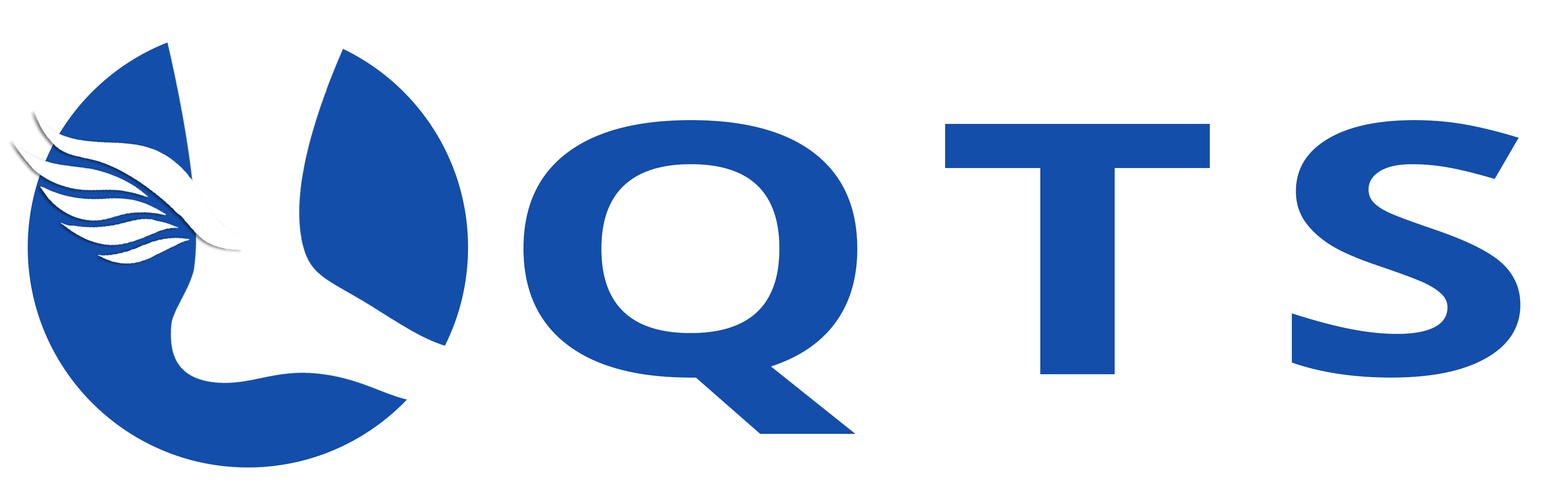
<style>
.page{position:relative;width:1568px;height:504px;background:#ffffff}
.page>*{position:absolute;margin:0}
.t1{font:351px "OpenSans-Bold";letter-spacing:0.1em;color:#134eab;scale:1.4 1}
</style>
<div class="page">
<p class="t1" style="left:523px;top:120px;width:998px;height:314px">QTS</p>
</div>
